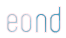
<style>
.page{position:relative;width:66px;height:38px;background:#ffffff}
.page>*{position:absolute;margin:0}
.t1{font:36px "071MKSD-01Medium"}
</style>
<div class="page">
<p class="t1" style="left:6px;top:6px;width:56px;height:28px">eond</p>
</div>
